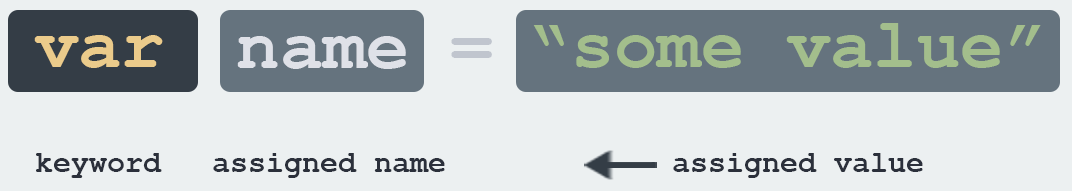
<style>
.page{position:relative;width:1072px;height:191px;background:#ecf0f1}
.page>*{position:absolute;margin:0}
.t1{font:72px "CourierNewPS-BoldMT";color:#a3be8c}
.t2{font:72px "CourierNewPS-BoldMT";color:#ebcb8b}
.t3{font:72px "CourierNewPS-BoldMT";color:#dfe1e8}
.t4{font:72px "CourierNewPS-BoldMT";color:#c0c5ce}
.t5{font:30px "CourierNewPS-BoldMT";color:#2b303b}
</style>
<div class="page">
<p class="t1" style="left:533px;top:23px;width:508px;height:45px">“some value”</p>
<p class="t2" style="left:34px;top:35px;width:129px;height:33px">var</p>
<p class="t3" style="left:237px;top:36px;width:169px;height:33px">name</p>
<p class="t4" style="left:451px;top:38px;width:41px;height:20px">=</p>
<p class="t5" style="left:36px;top:153px;width:126px;height:25px">keyword</p>
<p class="t5" style="left:213px;top:153px;width:232px;height:25px">assigned name</p>
<p class="t5" style="left:673px;top:153px;width:250px;height:25px">assigned value</p>
</div>
